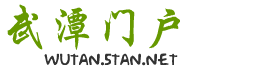
<style>
.page{position:relative;width:265px;height:69px;background:#ffffff}
.page>*{position:absolute;margin:0}
.t1{font:48px "HYi1gj";color:#669900}
.t2{font:14px "Groening-Plain";color:#333333}
.t3{font:14px "MADFONT";color:#333333}
</style>
<div class="page">
<p class="t1" style="left:7px;top:4px;width:173px;height:46px">武潭门户</p>
<p class="t2" style="left:44px;top:53px;width:134px;height:13px">wutan<span class="t3">.</span>5tan<span class="t3">.</span>net</p>
</div>
